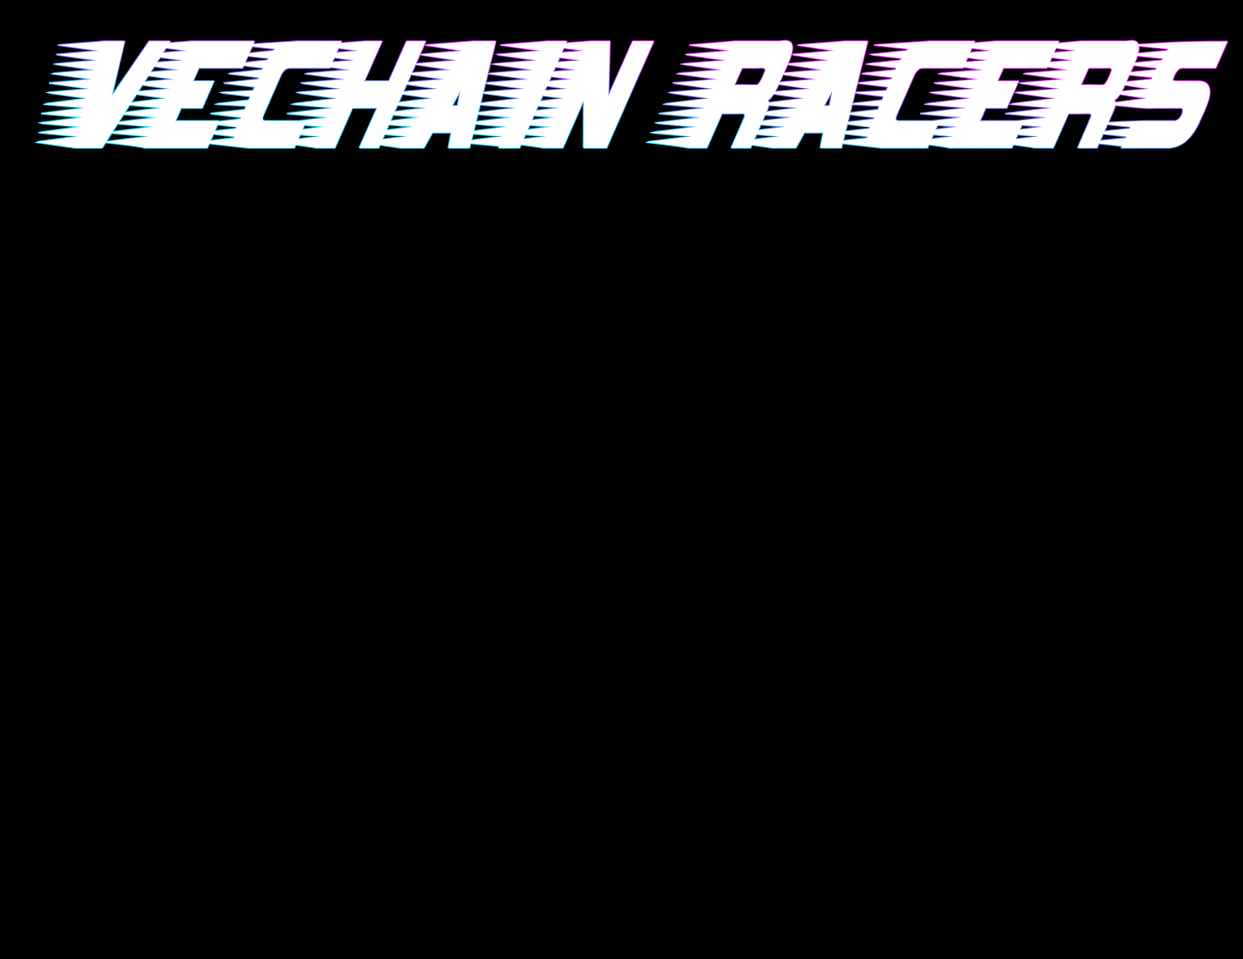
<style>
.page{position:relative;width:1243px;height:959px;background:#000000}
.page>*{position:absolute;margin:0}
.t1{font:141.9px "Barbatrick-Regular";color:#ffffff}
</style>
<div class="page">
<p class="t1" style="left:35px;top:40px;width:1192px;height:108px">VeChain Racers</p>
</div>
